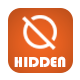
<style>
.page{position:relative;width:80px;height:80px;background:#ffffff}
.page>*{position:absolute;margin:0}
.t1{font:15px "Bauhaus93";color:#ffffff}
</style>
<div class="page">
<p class="t1" style="left:14px;top:56px;width:52px;height:11px">HIDDEN</p>
</div>
